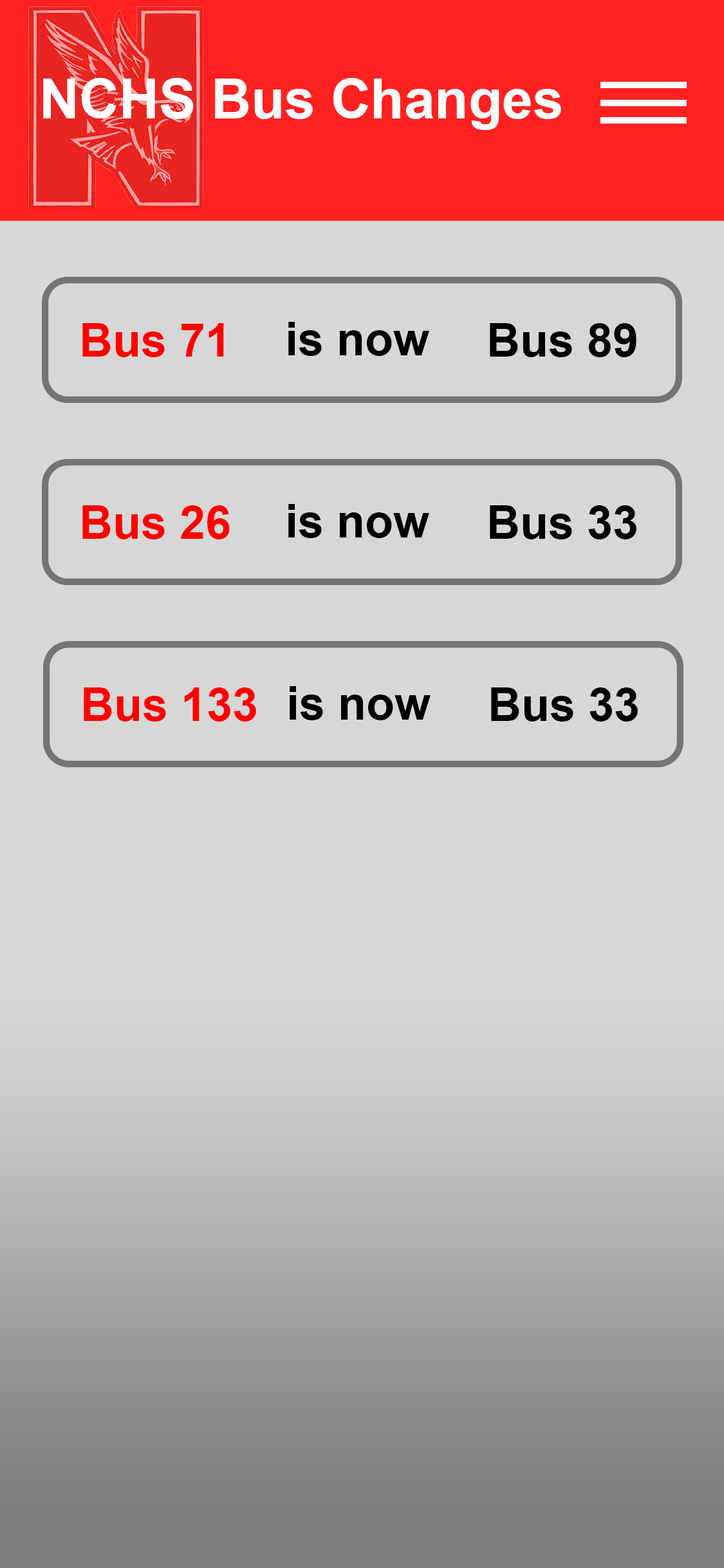
<style>
.page{position:relative;width:724px;height:1568px;background:#d7d7d7}
.page>*{position:absolute;margin:0}
.t1{font:55.2px "Arial-BoldMT";color:#ffffff}
.t2{font:46.3px "Arial-BoldMT";color:#ff0000}
.t3{font:46.3px "Arial-BoldMT";color:#000000}
</style>
<div class="page">
<p class="t1" style="left:43px;top:78px;width:518px;height:52px">NCHS Bus Changes</p>
<p class="t2" style="left:82px;top:323px;width:142px;height:34px">Bus 71</p>
<p class="t3" style="left:288px;top:322px;width:141px;height:34px">is now</p>
<p class="t3" style="left:490px;top:323px;width:147px;height:34px">Bus 89</p>
<p class="t2" style="left:82px;top:505px;width:148px;height:34px">Bus 26</p>
<p class="t3" style="left:288px;top:504px;width:141px;height:34px">is now</p>
<p class="t3" style="left:490px;top:505px;width:147px;height:34px">Bus 33</p>
<p class="t2" style="left:84px;top:687px;width:172px;height:35px">Bus 133</p>
<p class="t3" style="left:290px;top:686px;width:141px;height:34px">is now</p>
<p class="t3" style="left:491px;top:687px;width:147px;height:35px">Bus 33</p>
</div>
